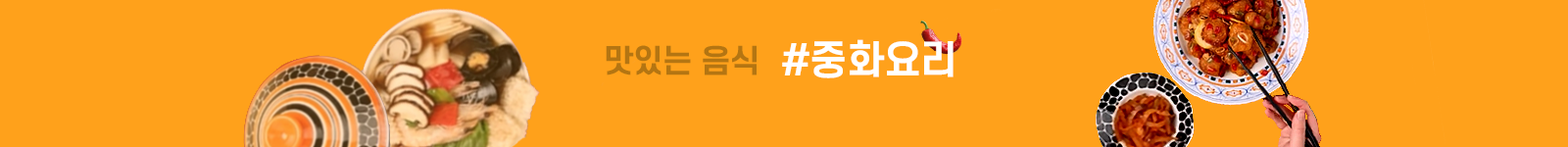
<style>
.page{position:relative;width:1568px;height:147px;background:#ffa11b}
.page>*{position:absolute;margin:0}
.t1{font:39.2px "S-CoreDream-6Bold";letter-spacing:-0.02em;color:#ffffff}
.t2{font:31.4px "S-CoreDream-6Bold";letter-spacing:-0.02em;color:#b47512}
</style>
<div class="page">
<p class="t1" style="left:782px;top:39px;width:172px;height:39px">#중화요리</p>
<p class="t2" style="left:606px;top:45px;width:151px;height:30px">맛있는 음식</p>
</div>
